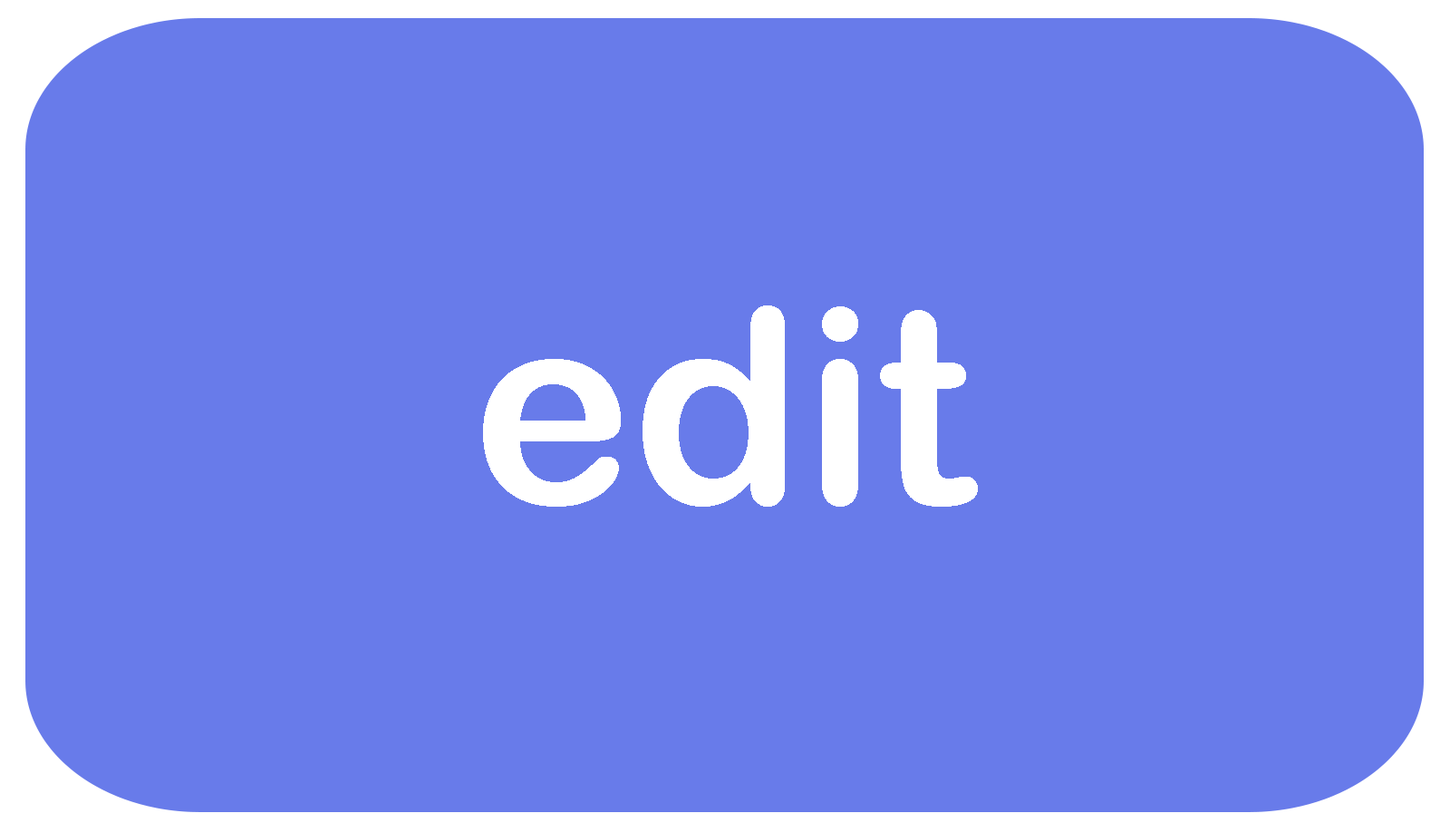
<style>
.page{position:relative;width:1450px;height:823px;background:#687bea}
.page>*{position:absolute;margin:0}
.t1{font:271.8px "ArialRoundedMTBold";color:#ffffff}
.t2{font:226.5px "Arial-BoldMT";color:#ffffff}
</style>
<div class="page">
<p class="t1" style="left:483px;top:305px;width:495px;height:201px"><span class="t2"><br></span>edit</p>
</div>
